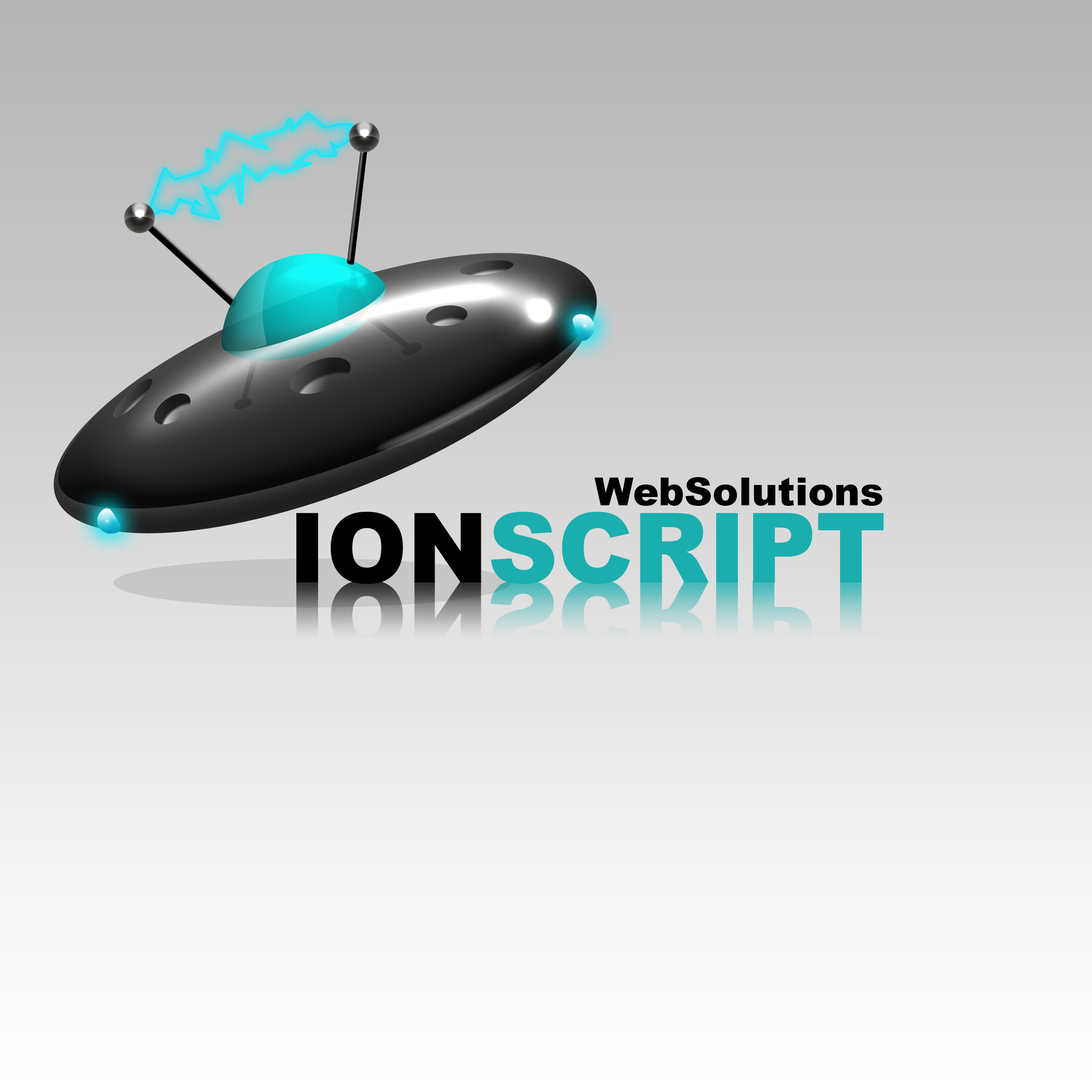
<style>
.page{position:relative;width:1092px;height:1092px}
.page>*{position:absolute;margin:0}
.t1{font:39px "Arial-Black";color:#000000}
.t2{font:96.9px "Arial-Black";color:#1baeae}
.t3{font:96.9px "Arial-Black";color:#000000}
.t4{font:96.9px "Arial-Black"}
</style>
<div class="page">
<p class="t1" style="left:595px;top:477px;width:288px;height:29px">WebSolutions</p>
<p class="t2" style="left:296px;top:511px;width:588px;height:73px"><span class="t3">ION</span>SCRIPT</p>
<p class="t4" style="left:296px;top:580px;width:185px;height:72px">ION</p>
<p class="t4" style="left:491px;top:580px;width:393px;height:72px">SCRIPT</p>
</div>
